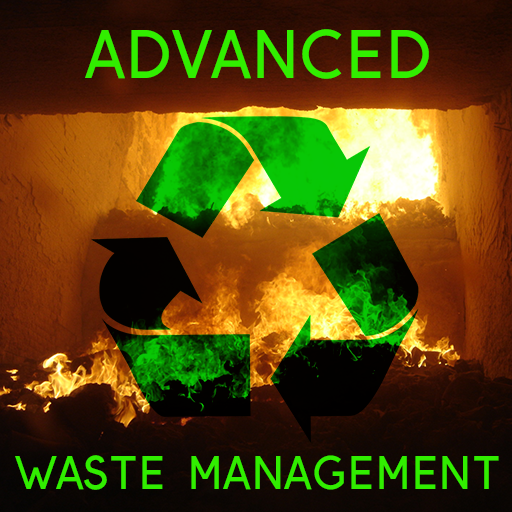
<style>
.page{position:relative;width:512px;height:512px}
.page>*{position:absolute;margin:0}
.t1{font:80px "Gauge-Regular";color:#31ee00}
.t2{font:55px "Gauge-Regular";color:#31ee00}
</style>
<div class="page">
<p class="t1" style="left:85px;top:29px;width:344px;height:50px">advanced</p>
<p class="t2" style="left:15px;top:455px;width:484px;height:35px">waste management</p>
</div>
